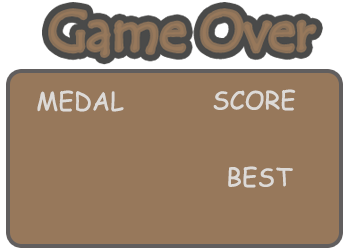
<style>
.page{position:relative;width:350px;height:250px;background:#97785b}
.page>*{position:absolute;margin:0}
.t1{font:25px "ComicSansMS";color:#dddad7}
</style>
<div class="page">
<p class="t1" style="left:213px;top:89px;width:83px;height:22px">SCORE</p>
<p class="t1" style="left:37px;top:90px;width:87px;height:22px">MEDAL</p>
<p class="t1" style="left:228px;top:166px;width:65px;height:22px">BEST</p>
</div>
